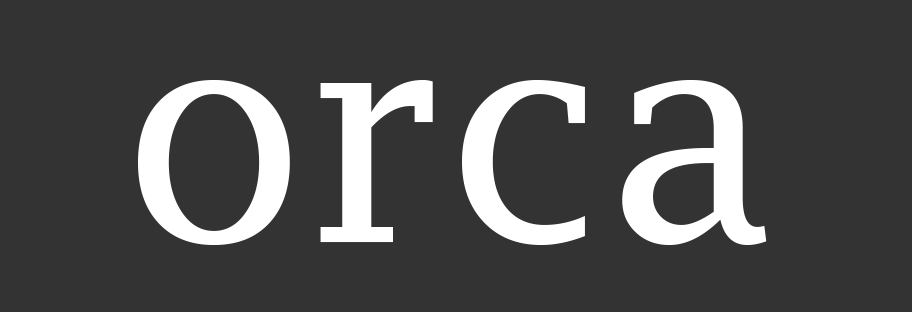
<style>
.page{position:relative;width:912px;height:312px;background:#333333}
.page>*{position:absolute;margin:0}
.t1{font:300px "LucidaFax";color:#ffffff}
</style>
<div class="page">
<p class="t1" style="left:138px;top:80px;width:629px;height:165px">orca</p>
</div>
